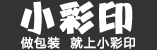
<style>
.page{position:relative;width:157px;height:50px;background:#333333}
.page>*{position:absolute;margin:0}
.t1{font:38px "FZTCGHJW--GB1-0";color:#ffffff;font-weight:bold}
.t2{font:12px "MicrosoftYaHei";letter-spacing:0.08em;color:#ffffff;font-weight:bold}
</style>
<div class="page">
<p class="t1" style="left:20px;top:1px;width:113px;height:34px">小彩印</p>
<p class="t2" style="left:20px;top:36px;width:115px;height:13px">做包装  就上小彩印</p>
</div>
